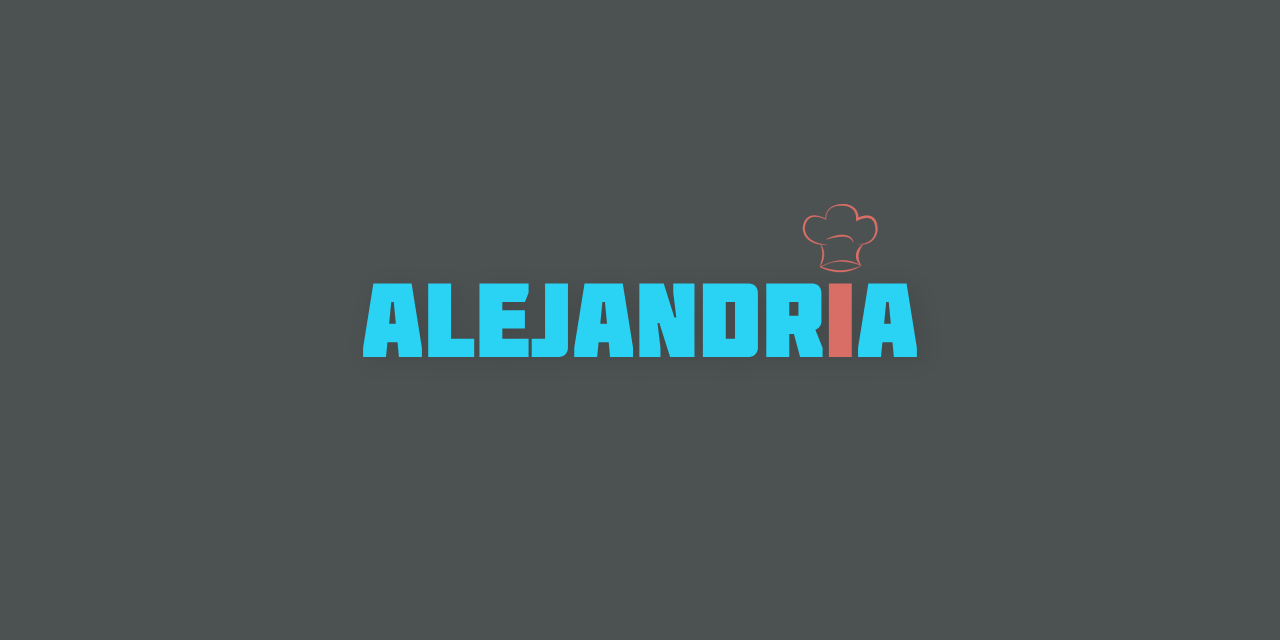
<style>
.page{position:relative;width:1280px;height:640px;background:#4c5152}
.page>*{position:absolute;margin:0}
.t1{font:105px "Molot";color:#2ad2f4}
.t2{font:105px "Molot";color:#d86e66}
</style>
<div class="page">
<p class="t1" style="left:363px;top:283px;width:554px;height:74px">ALEJANDR<span class="t2">I</span>A</p>
</div>
